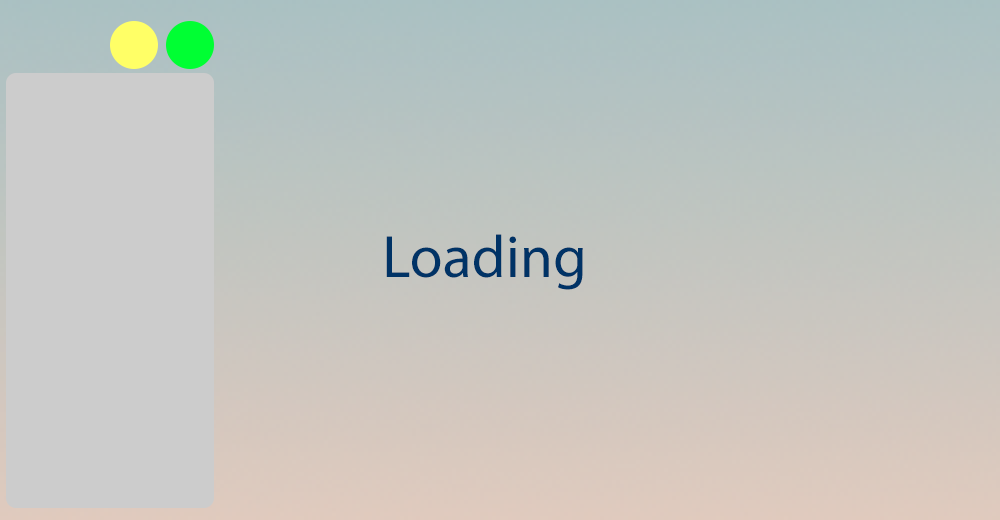
<style>
.page{position:relative;width:1000px;height:520px}
.page>*{position:absolute;margin:0}
.t1{font:60px "MyriadPro-Regular";color:#003366}
</style>
<div class="page">
<p class="t1" style="left:386px;top:234px;width:197px;height:56px">Loading</p>
</div>
